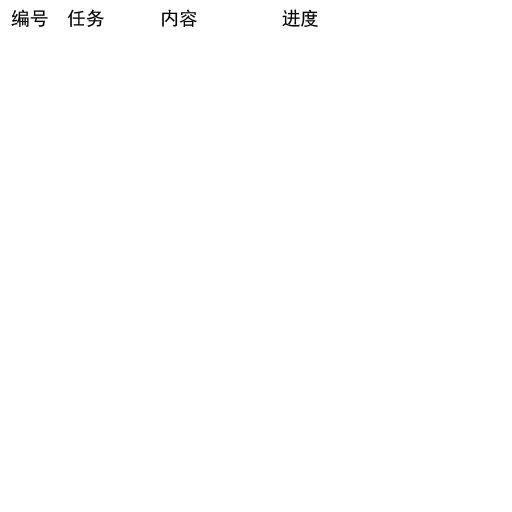
<style>
.page{position:relative;width:512px;height:512px;background:#ffffff}
.page>*{position:absolute;margin:0}
.t1{font:18.7px "SimHei";color:#000000}
</style>
<div class="page">
<p class="t1" style="left:11px;top:9px;width:307px;height:19px">编号  任务      内容         进度</p>
</div>
